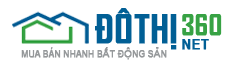
<style>
.page{position:relative;width:250px;height:80px;background:#ffffff}
.page>*{position:absolute;margin:0}
.t1{font:38.3px "SVN-AgencyFBbold";color:#015f95;font-weight:bold}
.t2{font:28.3px "AgencyFB-Bold";color:#37a244;font-weight:bold}
.t3{font:13.3px "Arial-BoldMT";color:#015f95;text-transform:uppercase;font-weight:bold}
.t4{font:10.2px "ArialNarrow";color:#95989a;text-transform:uppercase;font-weight:bold}
.t5{font:10.2px "ArialMT";color:#95989a;text-transform:uppercase;font-weight:bold}
</style>
<div class="page">
<p class="t1" style="left:95px;top:8px;width:82px;height:42px">ĐÔTHỊ</p>
<p class="t2" style="left:182px;top:14px;width:40px;height:22px">360</p>
<p class="t3" style="left:182px;top:39px;width:27px;height:11px">net</p>
<p class="t4" style="left:21px;top:47px;width:146px;height:13px">Mua bán nhanh b<span class="t5">ấ</span>t đ<span class="t5">ộ</span>ng s<span class="t5">ả</span>n</p>
</div>
